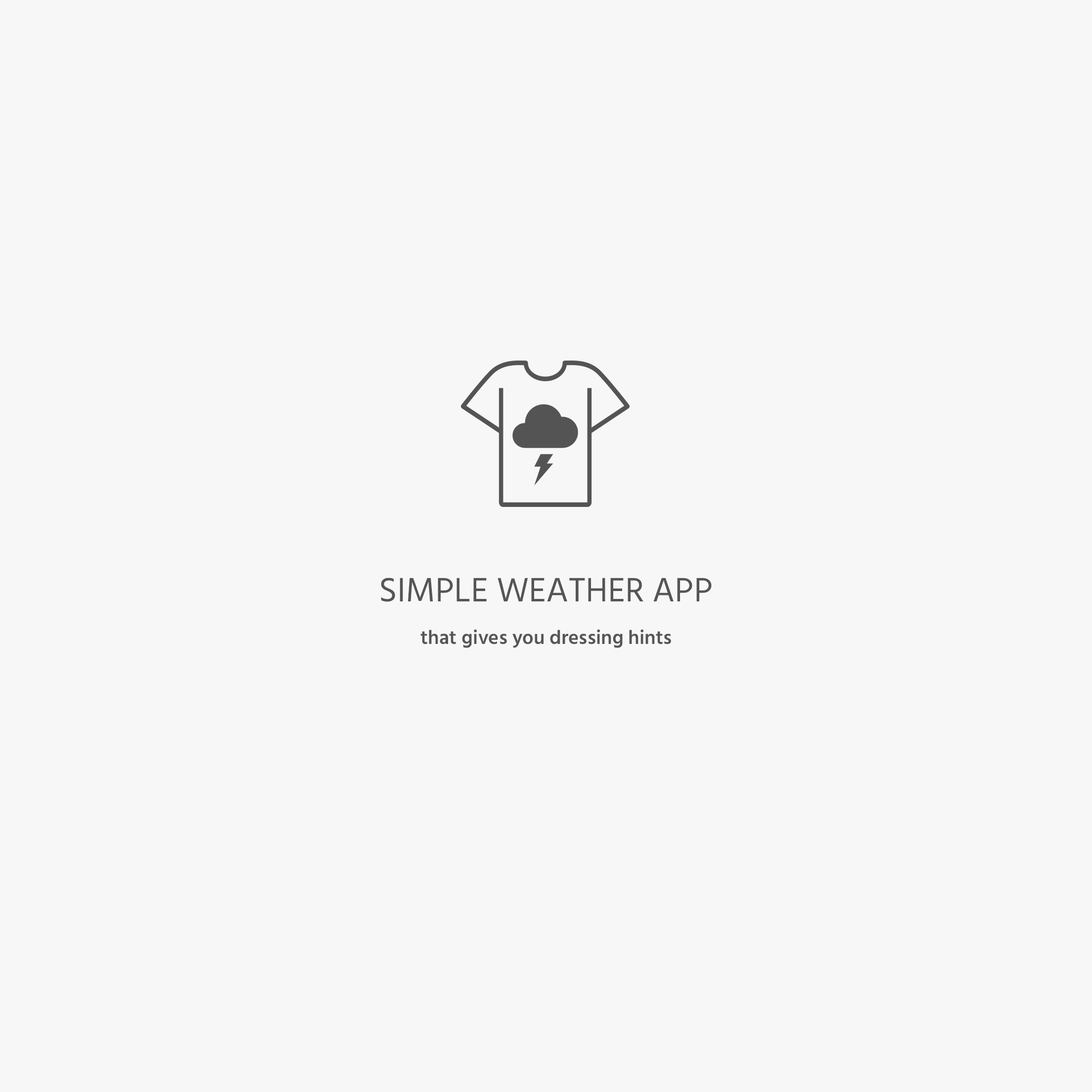
<style>
.page{position:relative;width:1092px;height:1092px;background:#f7f7f7}
.page>*{position:absolute;margin:0}
.t1{font:34.6px "Hind-Regular";color:#555555}
.t2{font:19.8px "Hind-Semibold";color:#555555}
</style>
<div class="page">
<p class="t1" style="left:381px;top:578px;width:331px;height:24px">SIMPLE WEATHER APP</p>
<p class="t2" style="left:420px;top:629px;width:251px;height:19px">that gives you dressing hints</p>
</div>
